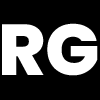
<style>
.page{position:relative;width:100px;height:100px;background:#000000}
.page>*{position:absolute;margin:0}
.t1{font:72px "Poppins-ExtraBold";color:#ffffff}
</style>
<div class="page">
<p class="t1" style="left:2px;top:23px;width:96px;height:53px">RG</p>
</div>
